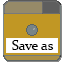
<style>
.page{position:relative;width:64px;height:64px;background:#c19724}
.page>*{position:absolute;margin:0}
.t1{font:14px "Constantia";color:#000000}
</style>
<div class="page">
<p class="t1" style="left:12px;top:40px;width:42px;height:10px">Save as</p>
</div>
